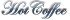
<style>
.page{position:relative;width:70px;height:20px;background:#ffffff}
.page>*{position:absolute;margin:0}
.t1{font:18px "EdwardianScrAltITCTTBold";letter-spacing:-0.005em;color:#3e4e5d;font-weight:bold}
</style>
<div class="page">
<p class="t1" style="left:1px;top:1px;width:66px;height:18px">HotCoffee</p>
</div>
